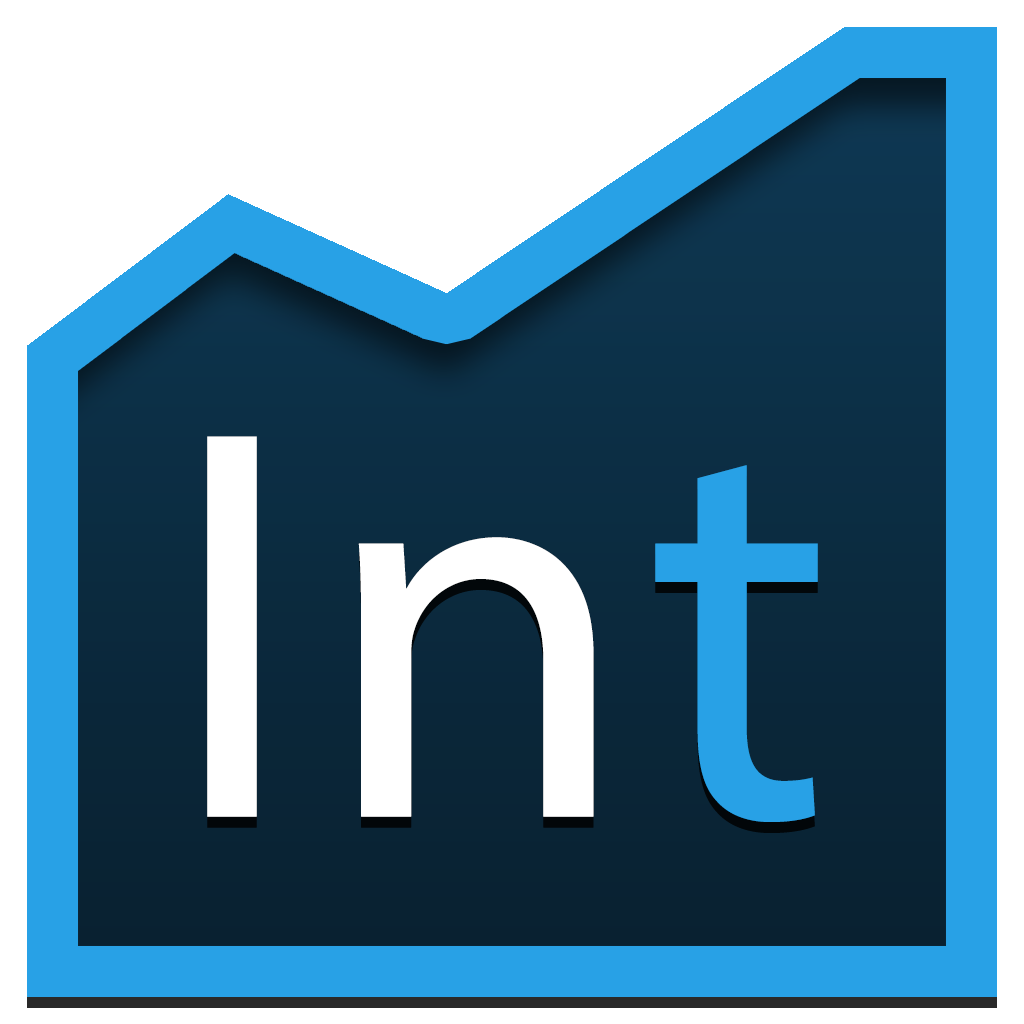
<style>
.page{position:relative;width:1024px;height:1024px;background:#ffffff}
.page>*{position:absolute;margin:0}
.t1{font:563.2px "MyriadPro-Regular";color:#ffffff;font-weight:bold}
.t2{font:563.2px "MyriadPro-Regular";color:#28a1e6;font-weight:bold}
</style>
<div class="page">
<p class="t1" style="left:207px;top:436px;width:611px;height:386px">In<span class="t2">t</span></p>
</div>
